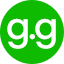
<style>
.page{position:relative;width:64px;height:64px;background:#0fbb00}
.page>*{position:absolute;margin:0}
.t1{font:36px "Poppins-Medium";letter-spacing:-0.06em;color:#ffffff}
</style>
<div class="page">
<p class="t1" style="left:7px;top:18px;width:49px;height:31px">g.g</p>
</div>
